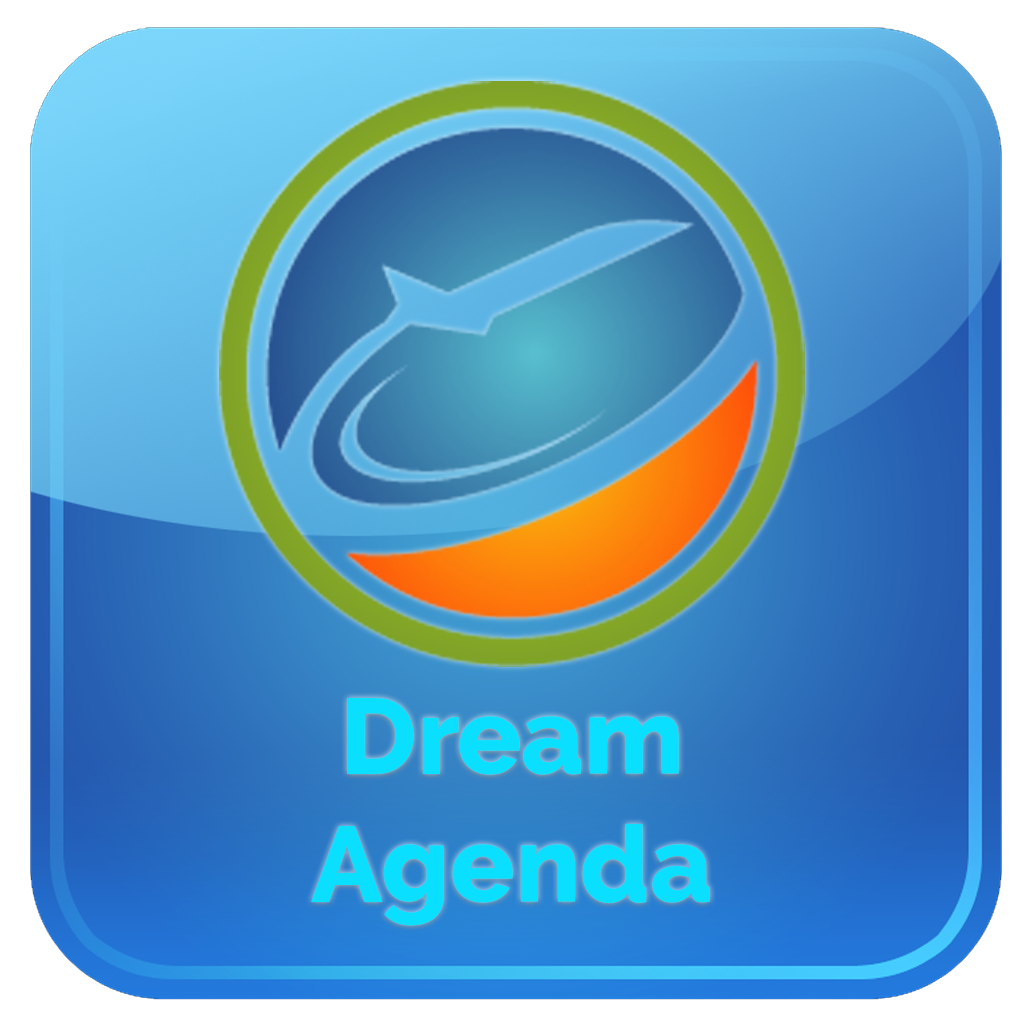
<style>
.page{position:relative;width:1024px;height:1024px}
.page>*{position:absolute;margin:0}
.t1{font:107px "Raleway-ExtraBold";color:#0adfff}
</style>
<div class="page">
<p class="t1" style="left:311px;top:698px;width:399px;height:228px;text-align:center">Dream<br>Agenda</p>
</div>
